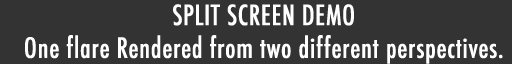
<style>
.page{position:relative;width:512px;height:64px;background:#333333}
.page>*{position:absolute;margin:0}
.t1{font:27.3px "Futura-CondensedMedium";color:#ffffff;font-weight:bold}
</style>
<div class="page">
<p class="t1" style="left:25px;top:4px;width:478px;height:60px;text-align:center">SPLIT SCREEN DEMO<br>One flare Rendered from two different perspectives.</p>
</div>
